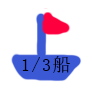
<style>
.page{position:relative;width:92px;height:92px;background:#ffffff}
.page>*{position:absolute;margin:0}
.t1{font:18px "SimSun";letter-spacing:0.08em;color:#000000}
</style>
<div class="page">
<p class="t1" style="left:22px;top:56px;width:48px;height:17px">1/3船</p>
</div>
